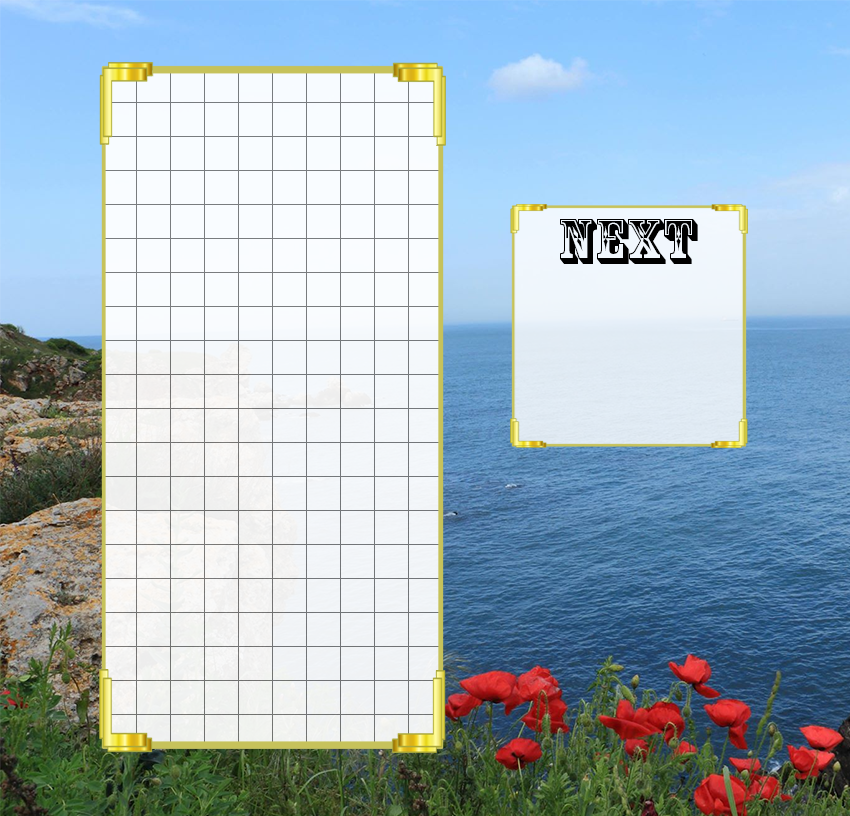
<style>
.page{position:relative;width:850px;height:816px}
.page>*{position:absolute;margin:0}
.t1{font:60px "RosewoodStd-Regular";color:#000000;scale:1.03 1}
</style>
<div class="page">
<p class="t1" style="left:560px;top:219px;width:138px;height:45px">NEXT</p>
</div>
